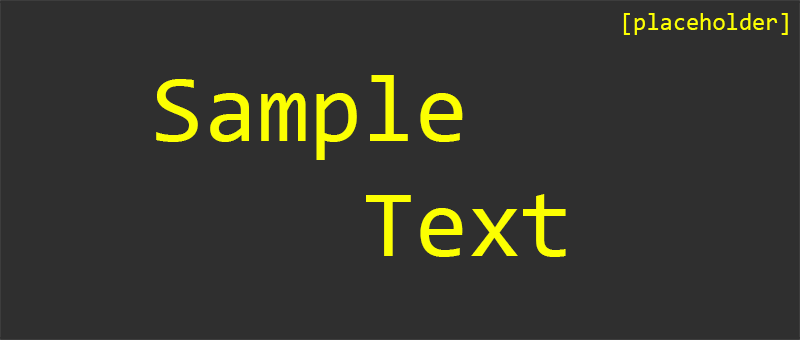
<style>
.page{position:relative;width:800px;height:340px;background:#2f2f2f}
.page>*{position:absolute;margin:0}
.t1{font:24px "Consolas";color:#fcff01}
.t2{font:96px "Consolas";color:#fcff01}
</style>
<div class="page">
<p class="t1" style="left:623px;top:13px;width:165px;height:22px">[placeholder]</p>
<p class="t2" style="left:156px;top:75px;width:410px;height:182px">Sample<br>    Text</p>
</div>
